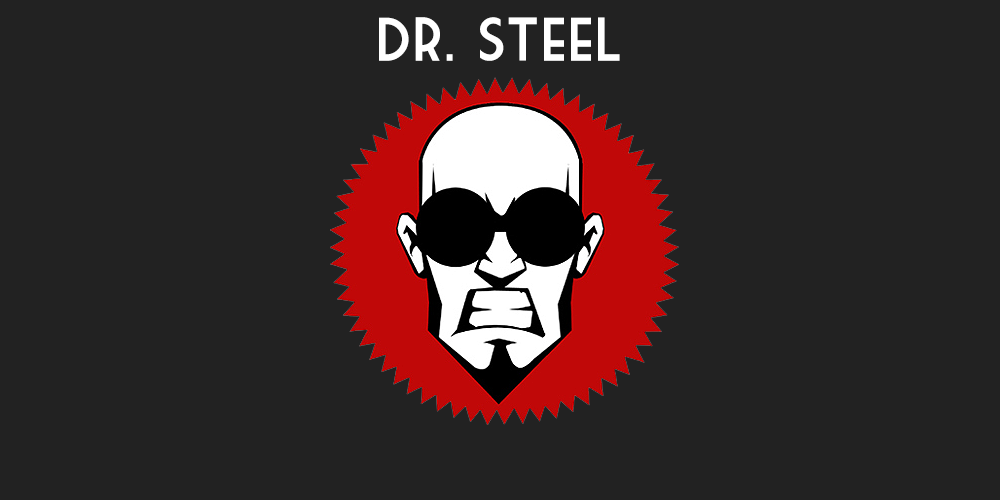
<style>
.page{position:relative;width:1000px;height:500px;background:#222222}
.page>*{position:absolute;margin:0}
.t1{font:60px "MarketDeco";color:#ffffff}
</style>
<div class="page">
<p class="t1" style="left:379px;top:17px;width:241px;height:44px">dr. steel</p>
</div>
